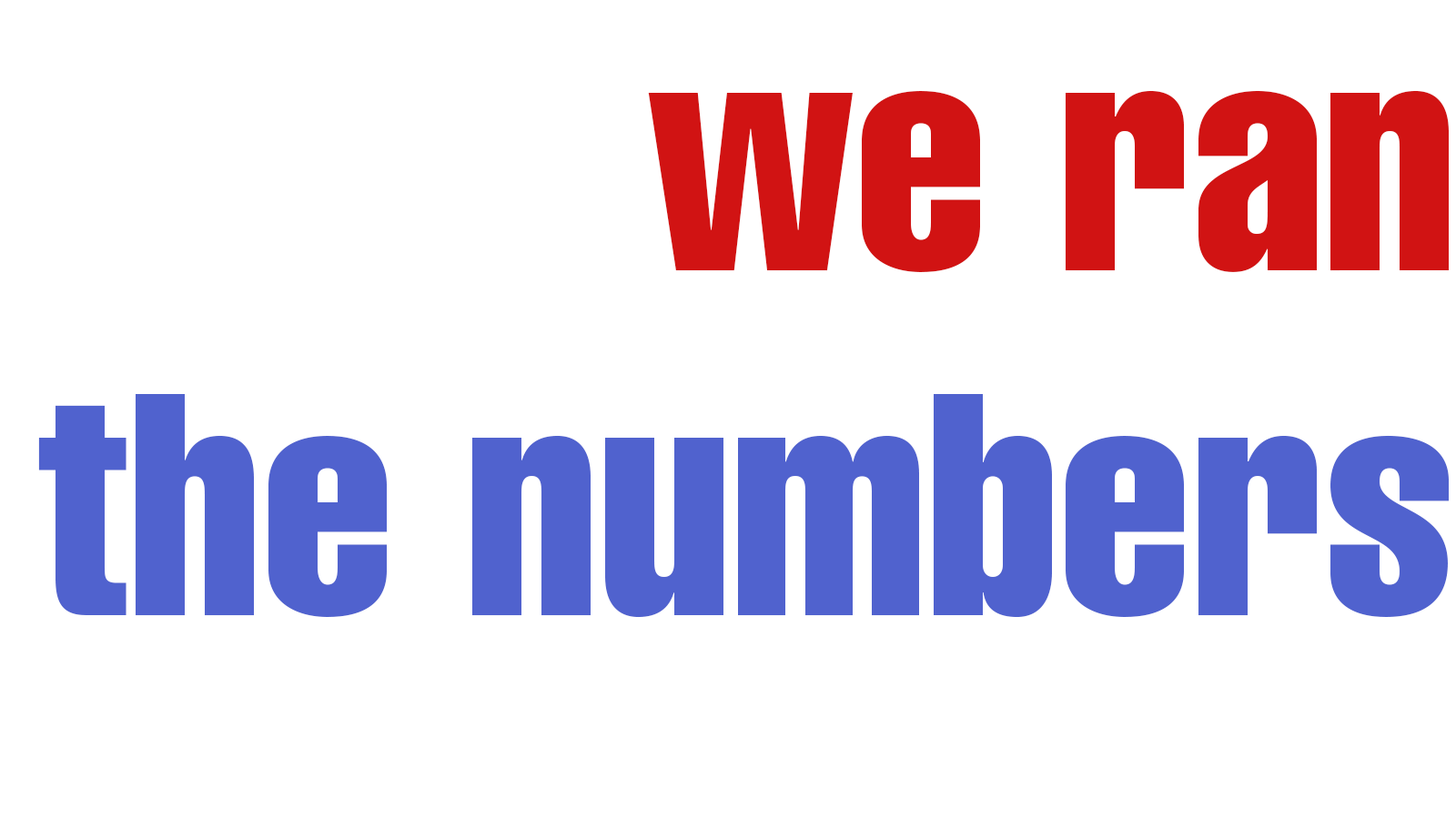
<style>
.page{position:relative;width:1456px;height:819px;background:#ffffff}
.page>*{position:absolute;margin:0}
.t1{font:310.9px "Helvetica-Compressed";color:#5062ce}
.t2{font:310.9px "Helvetica-Compressed";color:#d11313}
</style>
<div class="page">
<p class="t1" style="left:38px;top:90px;width:1411px;height:528px;text-align:right"><span class="t2">we ran<br></span>the numbers</p>
</div>
